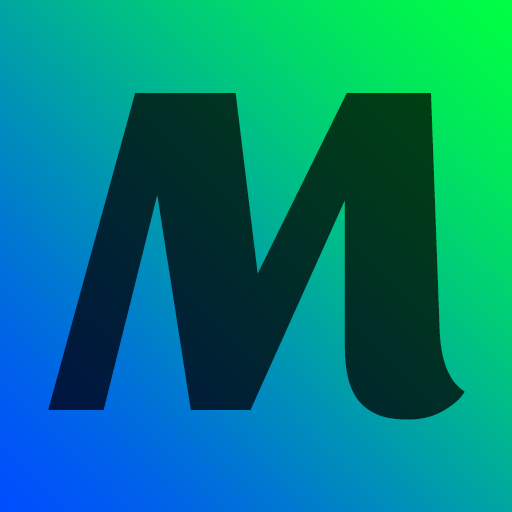
<style>
.page{position:relative;width:512px;height:512px}
.page>*{position:absolute;margin:0}
.t1{font:480px "SansitaOne";color:#002d28}
</style>
<div class="page">
<p class="t1" style="left:48px;top:93px;width:417px;height:327px">M</p>
</div>
